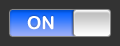
<style>
.page{position:relative;width:120px;height:46px;background:#333333}
.page>*{position:absolute;margin:0}
.t1{font:18px "ArialRoundedMTBold";color:#ffffff}
</style>
<div class="page">
<p class="t1" style="left:27px;top:16px;width:27px;height:14px">ON</p>
</div>
